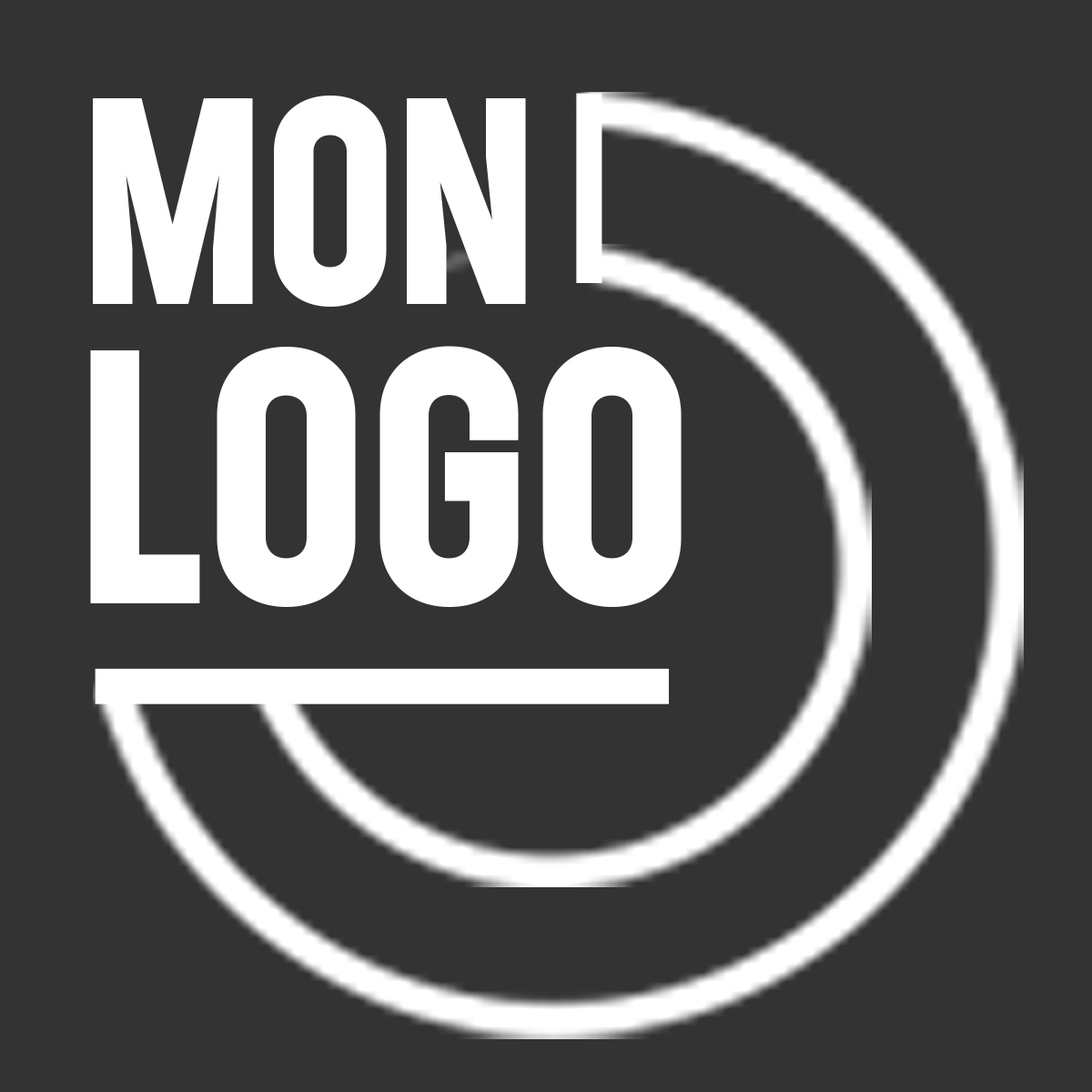
<style>
.page{position:relative;width:1092px;height:1092px;background:#333333}
.page>*{position:absolute;margin:0}
.t1{font:316.1px "Roundkey-Bold";letter-spacing:0.015em;color:#ffffff;text-transform:uppercase}
.t2{font:389.8px "Roundkey-Bold";letter-spacing:0.015em;color:#ffffff;text-transform:uppercase}
</style>
<div class="page">
<p class="t1" style="left:93px;top:96px;width:433px;height:212px">Mon</p>
<p class="t2" style="left:90px;top:346px;width:592px;height:261px">logo</p>
</div>
